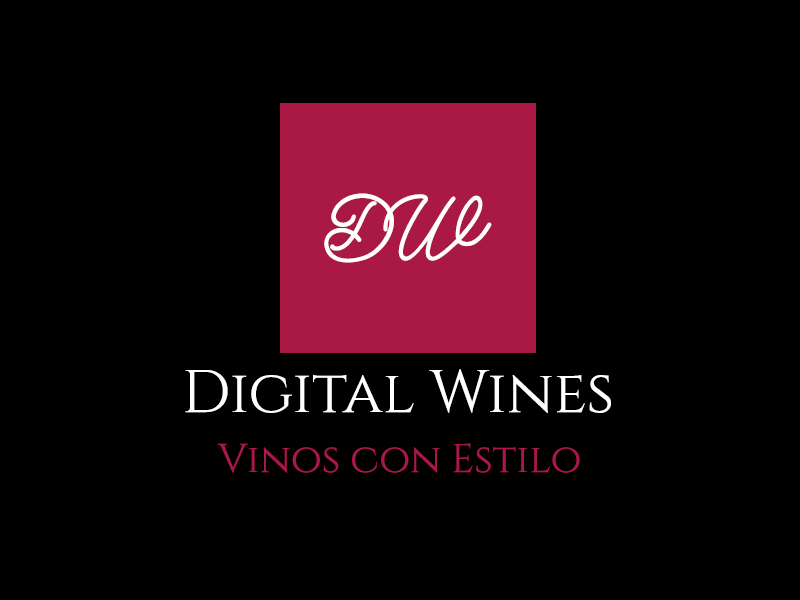
<style>
.page{position:relative;width:800px;height:600px;background:#000000}
.page>*{position:absolute;margin:0}
.t1{font:80px "AdamScript";color:#ffffff}
.t2{font:60px "Cinzel-Regular";color:#ffffff}
.t3{font:40px "Cinzel-Regular";color:#aa1945}
</style>
<div class="page">
<p class="t1" style="left:324px;top:193px;width:168px;height:70px">DW</p>
<p class="t2" style="left:185px;top:369px;width:426px;height:44px">Digital Wines</p>
<p class="t3" style="left:217px;top:443px;width:363px;height:30px">Vinos con Estilo</p>
</div>
